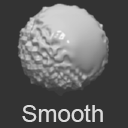
<style>
.page{position:relative;width:128px;height:128px;background:#333333}
.page>*{position:absolute;margin:0}
.t1{font:24px "ArialMT";color:#dadada}
</style>
<div class="page">
<p class="t1" style="left:22px;top:104px;width:81px;height:18px">Smooth</p>
</div>
